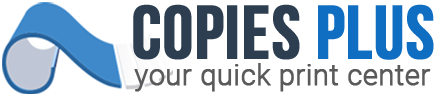
<style>
.page{position:relative;width:440px;height:95px;background:#ffffff}
.page>*{position:absolute;margin:0}
.t1{font:75.4px "BebasNeue";color:#2c3e50;text-transform:uppercase;font-weight:bold}
.t2{font:75.4px "BebasNeue";color:#0f6ec1;text-transform:uppercase;font-weight:bold}
.t3{font:28.9px "Roboto-Light";color:#5a5a5a;font-weight:bold}
</style>
<div class="page">
<p class="t1" style="left:133px;top:4px;width:301px;height:56px">Copies <span class="t2">PLUS</span></p>
<p class="t3" style="left:134px;top:63px;width:297px;height:29px">your quick print center</p>
</div>
